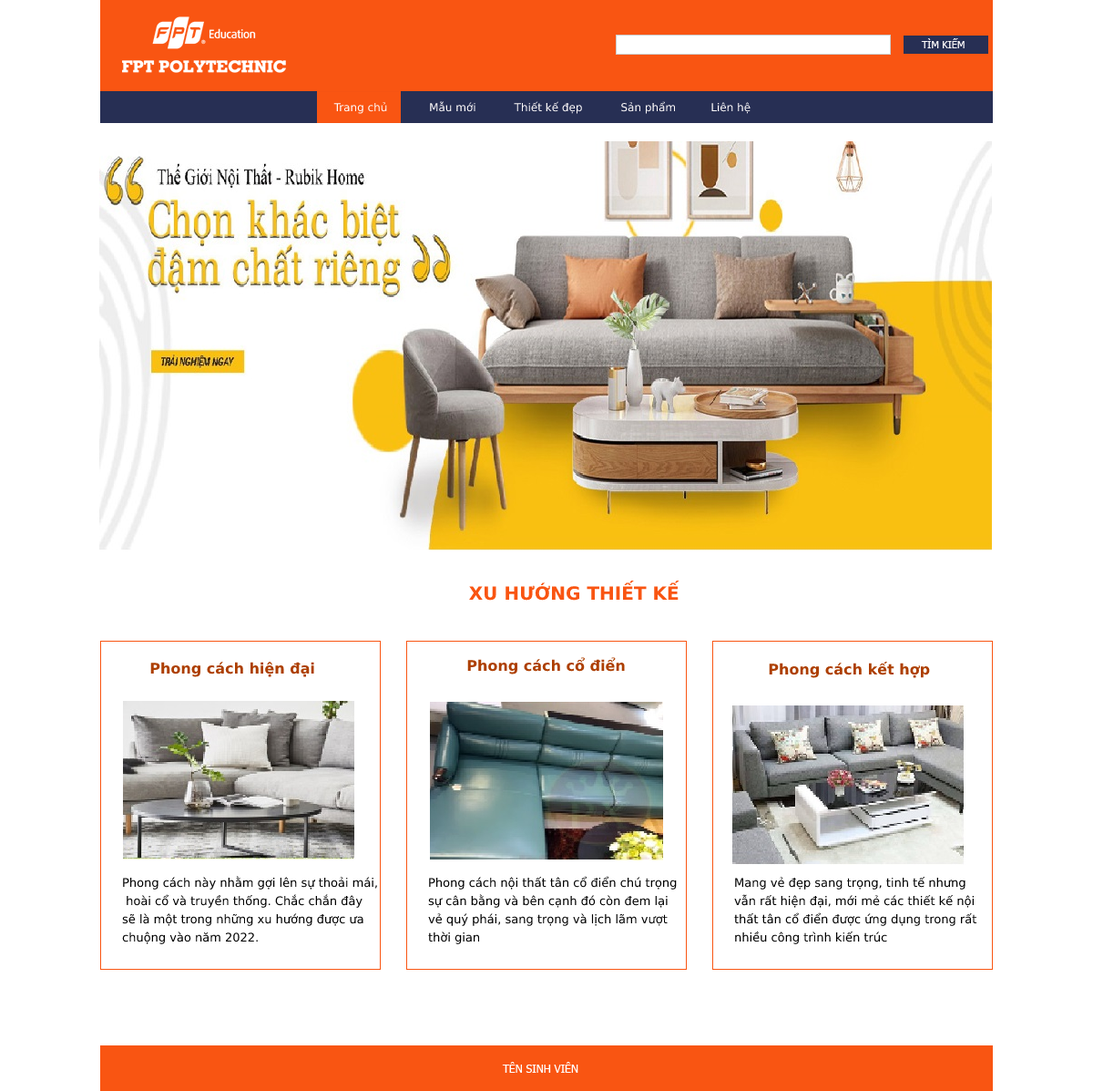
<style>
.page{position:relative;width:1093px;height:1091px;background:#ffffff}
.page>*{position:absolute;margin:0}
.t1{font:10px "Tahoma";color:#fefbfb}
.t2{font:10.9px "Tahoma";color:#fefbfb}
.t3{font:18.2px "Tahoma-Bold";color:#f95512}
.t4{font:14.6px "Tahoma-Bold";color:#ad3f00}
.t5{font:11.8px/18.2px "Tahoma";color:#000000}
.t6{font:10.9px "Tahoma";color:#ffffff}
</style>
<div class="page">
<p class="t1" style="left:921px;top:38px;width:44px;height:10px">TÌM KIẾM</p>
<p class="t2" style="left:333px;top:101px;width:418px;height:13px">Trang chủ            Mẫu mới           Thiết kế đẹp           Sản phẩm          Liên hệ</p>
<p class="t3" style="left:469px;top:579px;width:211px;height:21px">XU HƯỚNG THIẾT KẾ</p>
<p class="t4" style="left:150px;top:661px;width:164px;height:16px">Phong cách hiện đại</p>
<p class="t4" style="left:467px;top:657px;width:158px;height:17px">Phong cách cổ điển</p>
<p class="t4" style="left:769px;top:661px;width:161px;height:17px">Phong cách kết hợp</p>
<p class="t5" style="left:122px;top:876px;width:255px;height:68px">Phong cách này nhằm gợi lên sự thoải mái,<br> hoài cổ và truyền thống. Chắc chắn đây <br>sẽ là một trong những xu hướng được ưa <br>chuộng vào năm 2022.</p>
<p class="t5" style="left:428px;top:876px;width:249px;height:68px">Phong cách nội thất tân cổ điển chú trọng <br>sự cân bằng và bên cạnh đó còn đem lại <br>vẻ quý phái, sang trọng và lịch lãm vượt <br>thời gian</p>
<p class="t5" style="left:734px;top:876px;width:244px;height:68px">Mang vẻ đẹp sang trọng, tinh tế nhưng <br>vẫn rất hiện đại, mới mẻ các thiết kế nội <br>thất tân cổ điển được ứng dụng trong rất <br>nhiều công trình kiến trúc</p>
<p class="t6" style="left:502px;top:1061px;width:77px;height:11px">TÊN SINH VIÊN</p>
</div>
